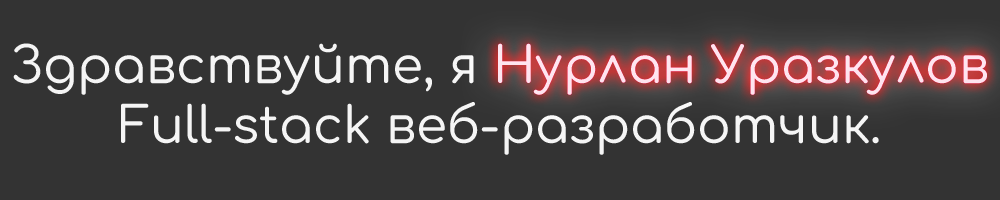
<style>
.page{position:relative;width:1000px;height:200px;background:#333333}
.page>*{position:absolute;margin:0}
.t1{font:50px "Comfortaa-Medium";color:#f5f5f5}
.t2{font:50px "Comfortaa-Medium";color:#f50065}
</style>
<div class="page">
<p class="t1" style="left:13px;top:43px;width:974px;height:112px;text-align:center">Здравствуйте, я <span class="t2">Нурлан Уразкулов<br></span>Full-stack веб-разработчик.</p>
</div>
